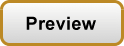
<style>
.page{position:relative;width:124px;height:46px}
.page>*{position:absolute;margin:0}
.t1{font:18px "Arial-BoldMT";letter-spacing:0.02em;color:#000000}
</style>
<div class="page">
<p class="t1" style="left:26px;top:16px;width:70px;height:14px">Preview</p>
</div>
